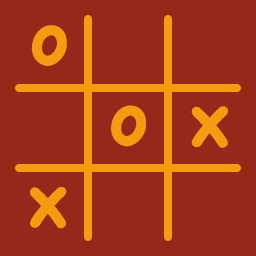
<style>
.page{position:relative;width:256px;height:256px;background:#96281b}
.page>*{position:absolute;margin:0}
.t1{font:71.9px "Chalkboard-Bold";letter-spacing:-0.05em;color:#f39c12}
</style>
<div class="page">
<p class="t1" style="left:31px;top:25px;width:36px;height:41px">o</p>
<p class="t1" style="left:111px;top:105px;width:35px;height:42px">o</p>
<p class="t1" style="left:191px;top:106px;width:37px;height:42px">x</p>
<p class="t1" style="left:30px;top:187px;width:37px;height:42px">x</p>
</div>
